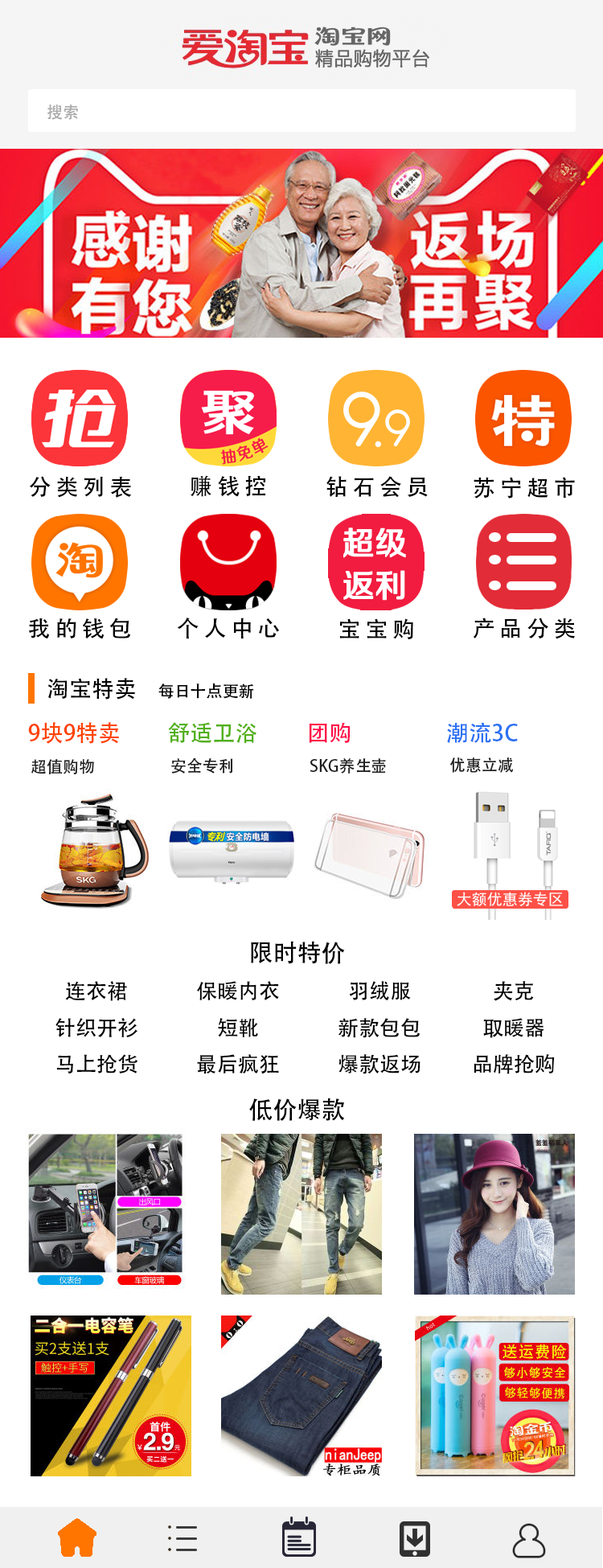
<style>
.page{position:relative;width:603px;height:1568px;background:#ffffff}
.page>*{position:absolute;margin:0}
.t1{font:16.1px "AdobeHeitiStd-Regular";color:#aaaaaa}
.t2{font:22.5px "AdobeHeitiStd-Regular";letter-spacing:0.2em;color:#000000}
.t3{font:22.5px "AdobeHeitiStd-Regular";color:#000000}
.t4{font:16.1px "AdobeHeitiStd-Regular";color:#000000}
.t5{font:22.5px "AdobeHeitiStd-Regular";color:#ff4200}
.t6{font:22.5px "AdobeHeitiStd-Regular";color:#50b015}
.t7{font:22.5px "AdobeHeitiStd-Regular";color:#ff0948}
.t8{font:22.5px "AdobeHeitiStd-Regular";color:#2b71f1}
.t9{font:16.1px "AdobeHeitiStd-Regular";color:#201f1f}
.t10{font:24.1px "AdobeHeitiStd-Regular";color:#000000}
.t11{font:20.9px "AdobeHeitiStd-Regular";color:#000000}
</style>
<div class="page">
<p class="t1" style="left:47px;top:105px;width:31px;height:15px">搜索</p>
<p class="t2" style="left:30px;top:476px;width:102px;height:22px">分类列表</p>
<p class="t2" style="left:191px;top:475px;width:75px;height:22px">赚钱控</p>
<p class="t2" style="left:326px;top:476px;width:102px;height:22px">钻石会员</p>
<p class="t2" style="left:474px;top:477px;width:101px;height:22px">苏宁超市</p>
<p class="t2" style="left:28px;top:618px;width:103px;height:21px">我的钱包</p>
<p class="t2" style="left:177px;top:618px;width:103px;height:21px">个人中心</p>
<p class="t2" style="left:473px;top:618px;width:102px;height:21px">产品分类</p>
<p class="t2" style="left:339px;top:618px;width:74px;height:21px">宝宝购</p>
<p class="t3" style="left:47px;top:678px;width:88px;height:22px">淘宝特卖</p>
<p class="t4" style="left:158px;top:683px;width:96px;height:16px">每日十点更新</p>
<p class="t5" style="left:28px;top:722px;width:91px;height:22px">9块9特卖</p>
<p class="t6" style="left:168px;top:722px;width:89px;height:22px">舒适卫浴</p>
<p class="t7" style="left:309px;top:722px;width:42px;height:21px">团购</p>
<p class="t8" style="left:447px;top:722px;width:71px;height:21px">潮流3C</p>
<p class="t9" style="left:31px;top:759px;width:63px;height:15px">超值购物</p>
<p class="t9" style="left:171px;top:757px;width:62px;height:17px">安全专利</p>
<p class="t9" style="left:310px;top:758px;width:76px;height:16px">SKG养生壶</p>
<p class="t9" style="left:449px;top:757px;width:65px;height:16px">优惠立减</p>
<p class="t10" style="left:251px;top:941px;width:94px;height:23px">限时特价</p>
<p class="t11" style="left:55px;top:981px;width:83px;height:93px;text-align:center">连衣裙<br>针织开衫<br>马上抢货</p>
<p class="t11" style="left:197px;top:981px;width:82px;height:93px;text-align:center">保暖内衣<br>短靴<br>最后疯狂</p>
<p class="t11" style="left:339px;top:981px;width:82px;height:93px;text-align:center">羽绒服<br>新款包包<br>爆款返场</p>
<p class="t11" style="left:474px;top:981px;width:81px;height:93px;text-align:center">夹克<br>取暖器<br>品牌抢购</p>
<p class="t10" style="left:249px;top:1098px;width:95px;height:23px">低价爆款</p>
</div>
